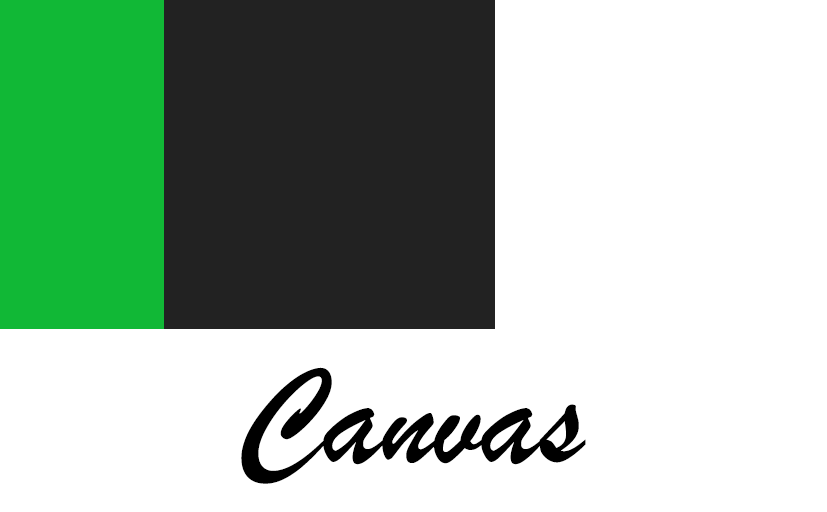
<style>
.page{position:relative;width:827px;height:512px;background:#ffffff}
.page>*{position:absolute;margin:0}
.t1{font:144px "BrushScriptMT";color:#000000}
</style>
<div class="page">
<p class="t1" style="left:241px;top:367px;width:345px;height:117px">Canvas</p>
</div>
